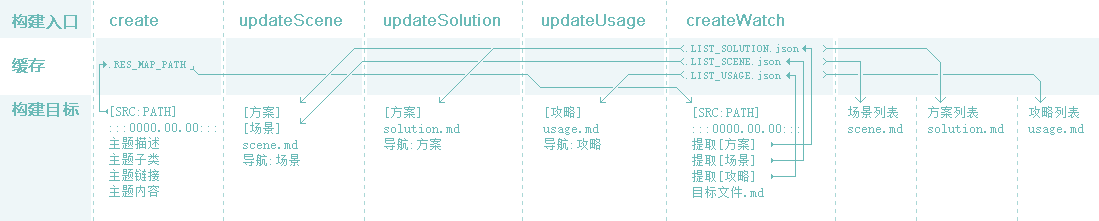
<style>
.page{position:relative;width:1099px;height:221px;background:#ffffff}
.page>*{position:absolute;margin:0}
.t1{font:16px/14.7px "MicrosoftYaHei";color:#6bbab7;font-weight:bold}
.t2{font:16px "ArialMT";color:#6bbab7;font-weight:bold}
.t3{font:10.7px/13.3px "SimSun";color:#6bbab7}
.t4{font:10.7px "SimSun";color:#6bbab7}
.t5{font:13.3px/16px "SimSun";color:#6bbab7}
</style>
<div class="page">
<p class="t1" style="left:12px;top:14px;width:67px;height:103px">构建入口<br><br><br>缓存<br><br><br>构建目标</p>
<p class="t2" style="left:110px;top:14px;width:674px;height:15px">create                updateScene        updateSolution        updateUsage        createWatch</p>
<p class="t3" style="left:686px;top:44px;width:113px;height:37px">.LIST_SOLUTION.json<br>.LIST_SCENE.json<br>.LIST_USAGE.json</p>
<p class="t4" style="left:109px;top:61px;width:77px;height:9px">.RES_MAP_PATH</p>
<p class="t5" style="left:109px;top:106px;width:107px;height:91px">[SRC:PATH]<br>:::0000.00.00:::<br>主题描述<br>主题子类<br>主题链接<br>主题内容</p>
<p class="t5" style="left:243px;top:106px;width:57px;height:60px">[方案]<br>[场景]<br>scene.md<br>导航:场景</p>
<p class="t5" style="left:384px;top:106px;width:76px;height:44px">[方案]<br>solution.md<br>导航:方案</p>
<p class="t5" style="left:543px;top:106px;width:58px;height:44px">[攻略]<br>usage.md<br>导航:攻略</p>
<p class="t5" style="left:692px;top:107px;width:107px;height:91px">[SRC:PATH]<br>:::0000.00.00:::<br>提取[方案]<br>提取[场景]<br>提取[攻略]<br>目标文件.md</p>
<p class="t5" style="left:848px;top:106px;width:55px;height:27px">场景列表<br>scene.md</p>
<p class="t5" style="left:928px;top:106px;width:76px;height:27px">方案列表<br>solution.md</p>
<p class="t5" style="left:1028px;top:106px;width:56px;height:29px">攻略列表<br>usage.md</p>
</div>
